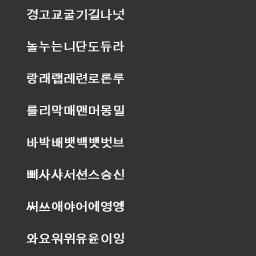
<style>
.page{position:relative;width:256px;height:256px;background:#333333}
.page>*{position:absolute;margin:0}
.t1{font:12px "ArialUnicodeMS";color:#ffffff;font-weight:bold}
</style>
<div class="page">
<p class="t1" style="left:26px;top:8px;width:99px;height:237px">경고교굴기길나넛<br>놀누는니단도듀라<br>랑래랩레련로론루<br>를리막매맨머몽밀<br>바박배뱃뱩뱻벗브<br>삐사샤서션스승신<br>써쓰애야어에영옝<br>와요워위유윤이잉</p>
</div>
